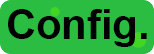
<style>
.page{position:relative;width:154px;height:54px;background:#2abd42}
.page>*{position:absolute;margin:0}
.t1{font:41.7px "Arial-BoldMT";color:#000000}
</style>
<div class="page">
<p class="t1" style="left:8px;top:9px;width:139px;height:38px">Config.</p>
</div>
